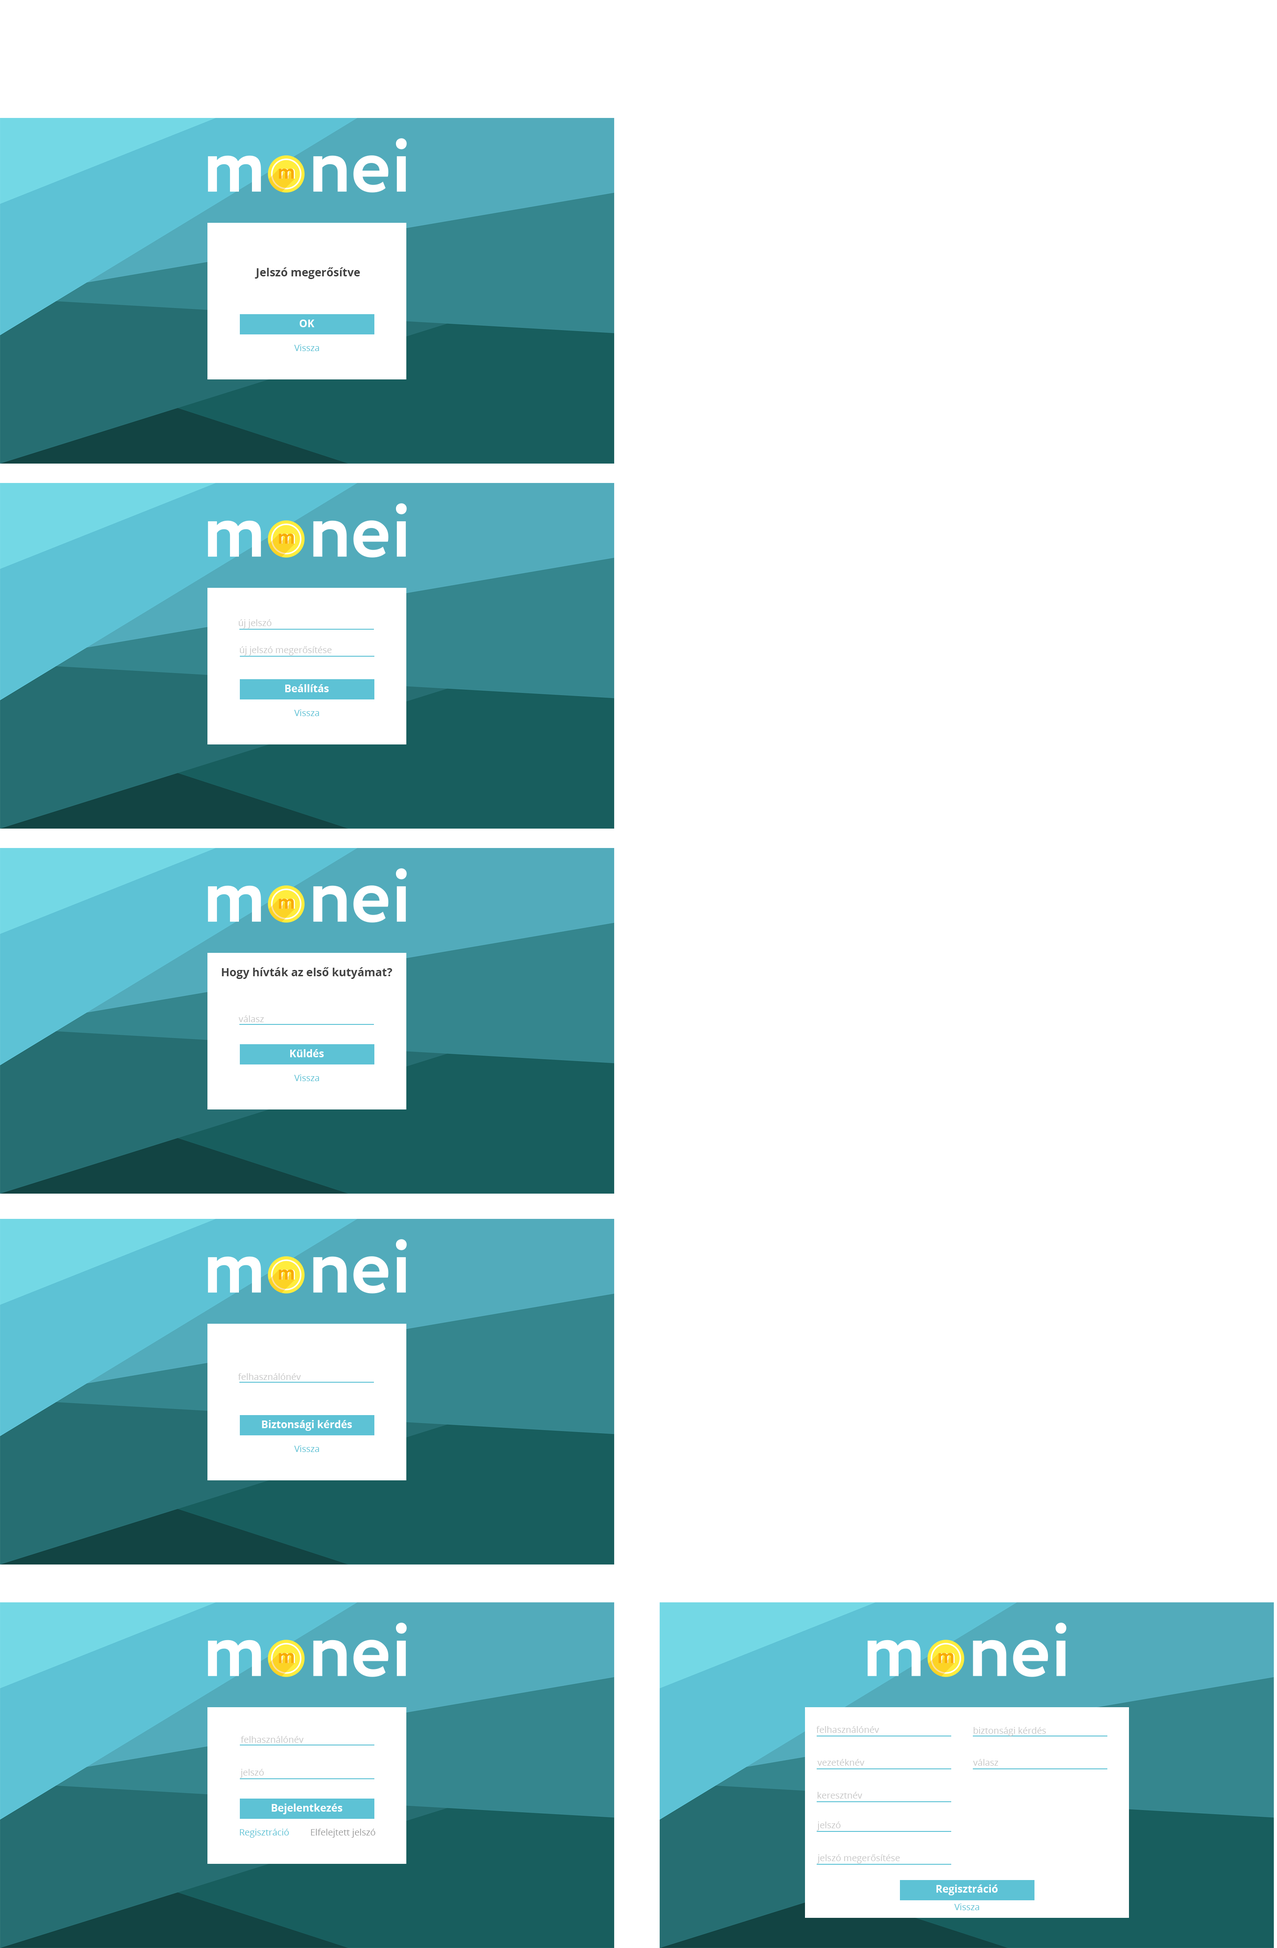
<style>
.page{position:relative;width:1277px;height:1948px;background:#ffffff}
.page>*{position:absolute;margin:0}
.t1{font:11.2px "OpenSans-Bold";color:#414141}
.t2{font:10.3px "OpenSans-Bold";color:#ffffff}
.t3{font:9px "OpenSans-Regular";color:#5dc2d5}
.t4{font:9px "OpenSans-Regular";color:#c7c7c7}
.t5{font:9px "OpenSans-Regular";color:#9b9b9b}
</style>
<div class="page">
<p class="t1" style="left:255px;top:267px;width:105px;height:12px">Jelszó megerősítve</p>
<p class="t2" style="left:300px;top:320px;width:15px;height:7px">OK</p>
<p class="t3" style="left:294px;top:344px;width:25px;height:7px">Vissza</p>
<p class="t4" style="left:238px;top:619px;width:34px;height:9px">új jelszó</p>
<p class="t4" style="left:240px;top:646px;width:92px;height:9px">új jelszó megerősítése</p>
<p class="t2" style="left:285px;top:684px;width:44px;height:8px">Beállítás</p>
<p class="t3" style="left:294px;top:709px;width:25px;height:7px">Vissza</p>
<p class="t1" style="left:222px;top:967px;width:170px;height:12px">Hogy hívták az első kutyámat?</p>
<p class="t4" style="left:238px;top:1015px;width:26px;height:7px">válasz</p>
<p class="t2" style="left:290px;top:1049px;width:34px;height:8px">Küldés</p>
<p class="t3" style="left:294px;top:1074px;width:25px;height:7px">Vissza</p>
<p class="t4" style="left:238px;top:1373px;width:63px;height:7px">felhasználónév</p>
<p class="t2" style="left:262px;top:1420px;width:90px;height:11px">Biztonsági kérdés</p>
<p class="t3" style="left:294px;top:1445px;width:25px;height:7px">Vissza</p>
<p class="t4" style="left:816px;top:1726px;width:63px;height:6px">felhasználónév</p>
<p class="t4" style="left:973px;top:1727px;width:73px;height:9px">biztonsági kérdés</p>
<p class="t4" style="left:241px;top:1736px;width:63px;height:6px">felhasználónév</p>
<p class="t4" style="left:240px;top:1768px;width:24px;height:10px">jelszó</p>
<p class="t4" style="left:817px;top:1759px;width:47px;height:6px">vezetéknév</p>
<p class="t4" style="left:973px;top:1759px;width:26px;height:6px">válasz</p>
<p class="t4" style="left:818px;top:1791px;width:44px;height:7px">keresztnév</p>
<p class="t2" style="left:272px;top:1803px;width:70px;height:11px">Bejelentkezés</p>
<p class="t3" style="left:240px;top:1828px;width:49px;height:9px">Regisztráció</p>
<p class="t5" style="left:311px;top:1828px;width:64px;height:9px">Elfelejtett jelszó</p>
<p class="t4" style="left:817px;top:1821px;width:24px;height:9px">jelszó</p>
<p class="t4" style="left:817px;top:1854px;width:83px;height:9px">jelszó megerősítése</p>
<p class="t2" style="left:936px;top:1884px;width:62px;height:11px">Regisztráció</p>
<p class="t3" style="left:954px;top:1903px;width:25px;height:7px">Vissza</p>
</div>
